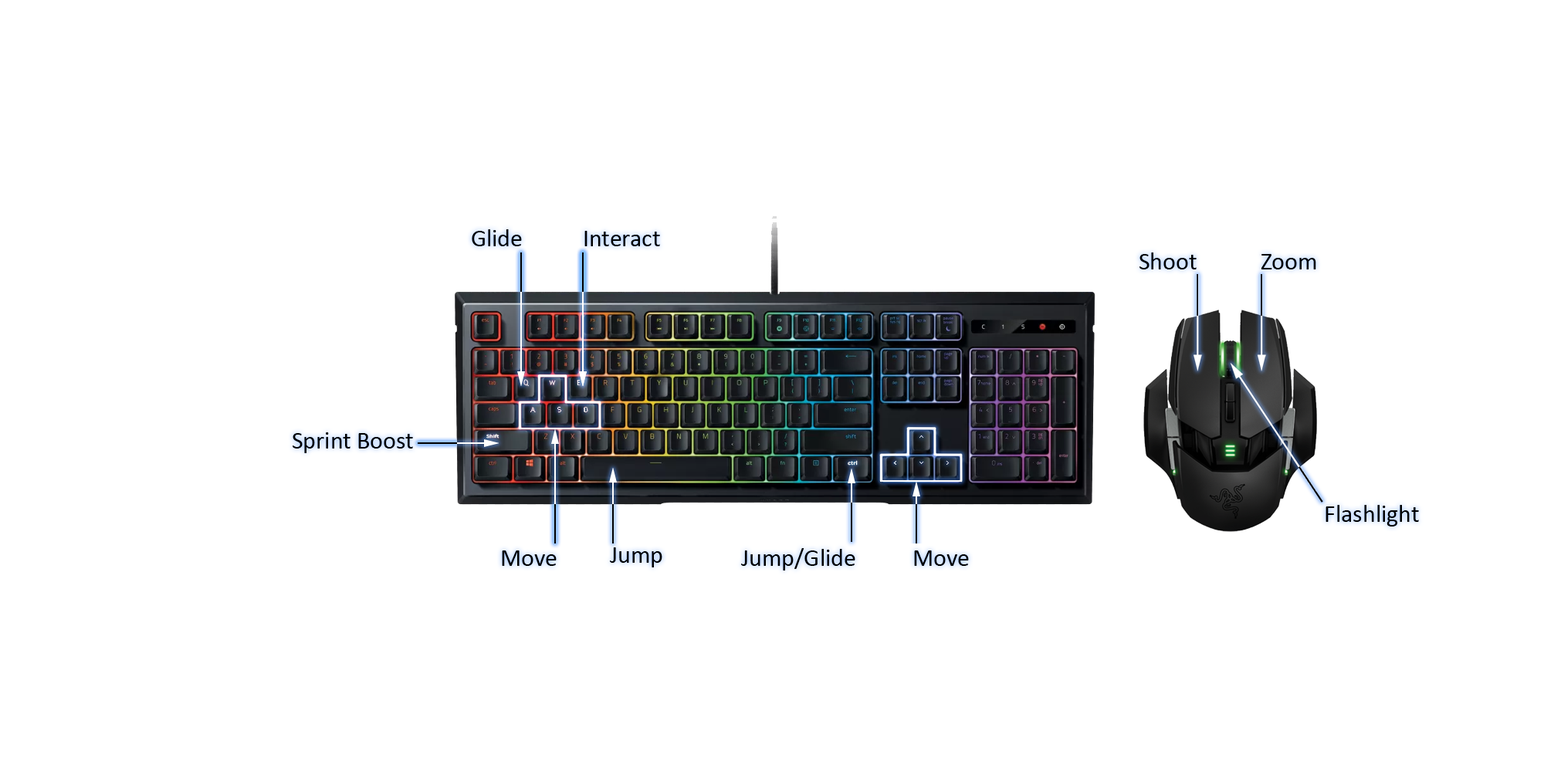
<style>
.page{position:relative;width:1544px;height:772px;background:#ffffff}
.page>*{position:absolute;margin:0}
.t1{font:24.7px "Calibri";color:#000000}
.t2{font:4.8px "Calibri";color:#ffffff;scale:1.42 1}
.t3{font:5.6px "Calibri";color:#ffffff;scale:1.32 1}
</style>
<div class="page">
<p class="t1" style="left:472px;top:229px;width:50px;height:17px">Glide</p>
<p class="t1" style="left:585px;top:231px;width:75px;height:15px">Interact</p>
<p class="t1" style="left:1140px;top:252px;width:57px;height:17px">Shoot</p>
<p class="t1" style="left:1261px;top:254px;width:56px;height:15px">Zoom</p>
<p class="t1" style="left:293px;top:432px;width:120px;height:21px">Sprint Boost</p>
<p class="t2" style="left:486px;top:434px;width:14px;height:5px">Shift</p>
<p class="t2" style="left:486px;top:434px;width:14px;height:5px">Shift</p>
<p class="t3" style="left:848px;top:460px;width:10px;height:6px">ctrl</p>
<p class="t1" style="left:1326px;top:505px;width:93px;height:22px">Flashlight</p>
<p class="t1" style="left:502px;top:551px;width:55px;height:15px">Move</p>
<p class="t1" style="left:610px;top:547px;width:53px;height:21px">Jump</p>
<p class="t1" style="left:741px;top:548px;width:115px;height:23px">Jump/Glide</p>
<p class="t1" style="left:914px;top:551px;width:55px;height:15px">Move</p>
</div>
